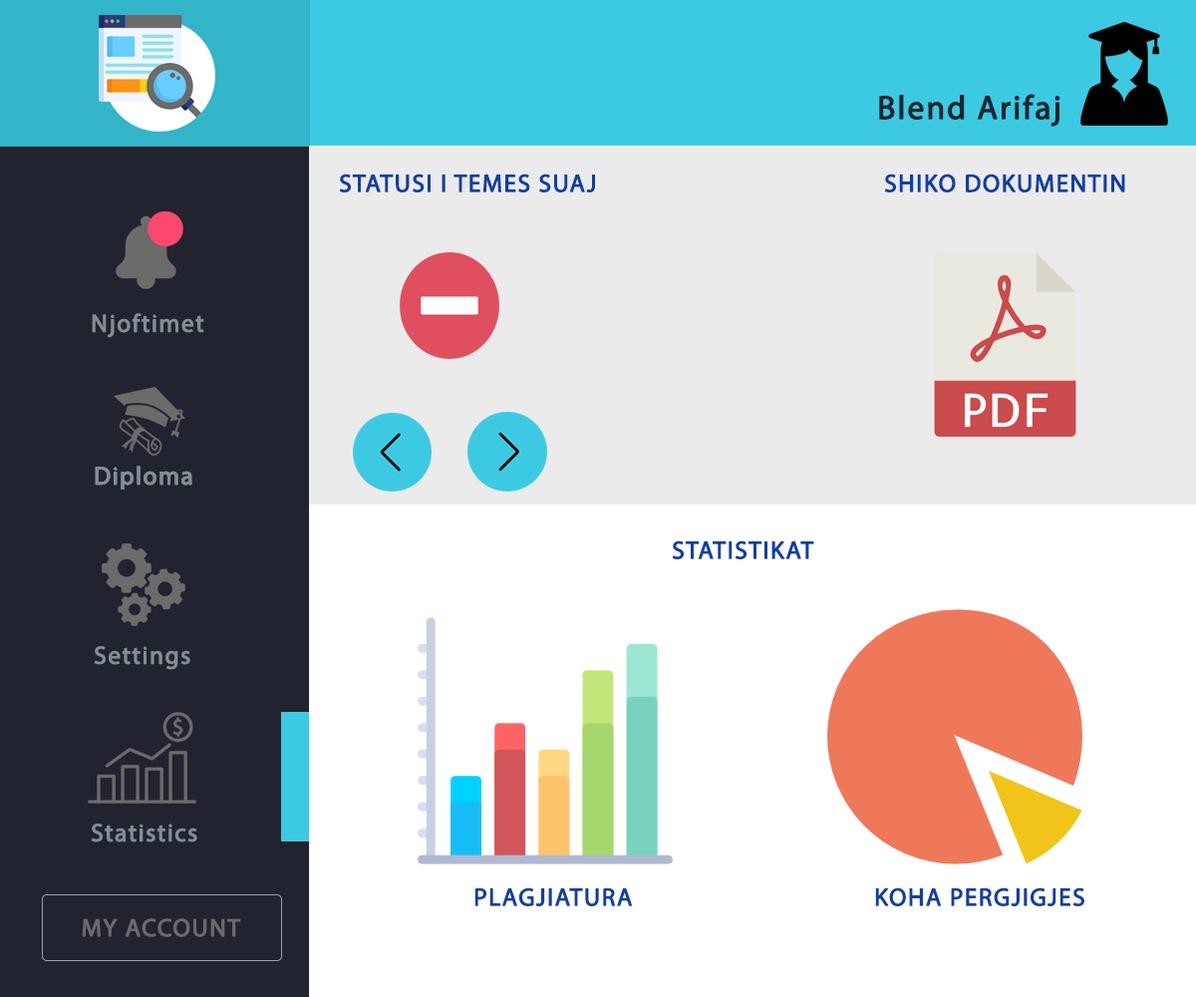
<style>
.page{position:relative;width:1196px;height:997px;background:#ffffff}
.page>*{position:absolute;margin:0}
.t1{font:33.2px "MyriadPro-Regular";letter-spacing:0.04em;color:#21232f;font-weight:bold}
.t2{font:24.9px "MyriadPro-Regular";letter-spacing:0.04em;color:#0d3fa6;font-weight:bold}
.t3{font:24.9px "MyriadPro-Regular";letter-spacing:0.04em;color:#828e90;font-weight:bold}
.t4{font:24.9px "MyriadPro-Regular";letter-spacing:0.04em;color:#6d6a6a;font-weight:bold}
</style>
<div class="page">
<p class="t1" style="left:879px;top:94px;width:182px;height:33px">Blend Arifaj</p>
<p class="t2" style="left:339px;top:173px;width:256px;height:19px">STATUSI I TEMES SUAJ</p>
<p class="t2" style="left:884px;top:173px;width:241px;height:19px">SHIKO DOKUMENTIN</p>
<p class="t3" style="left:92px;top:313px;width:112px;height:25px">Njoftimet</p>
<p class="t3" style="left:95px;top:466px;width:97px;height:23px">Diploma</p>
<p class="t3" style="left:95px;top:466px;width:97px;height:23px">Diploma</p>
<p class="t2" style="left:672px;top:540px;width:142px;height:19px">STATISTIKAT</p>
<p class="t3" style="left:94px;top:646px;width:96px;height:24px">Settings</p>
<p class="t3" style="left:91px;top:823px;width:106px;height:19px">Statistics</p>
<p class="t2" style="left:474px;top:887px;width:159px;height:19px">PLAGJIATURA</p>
<p class="t2" style="left:875px;top:887px;width:210px;height:19px">KOHA PERGJIGJES</p>
<p class="t4" style="left:82px;top:918px;width:159px;height:19px">MY ACCOUNT</p>
</div>
